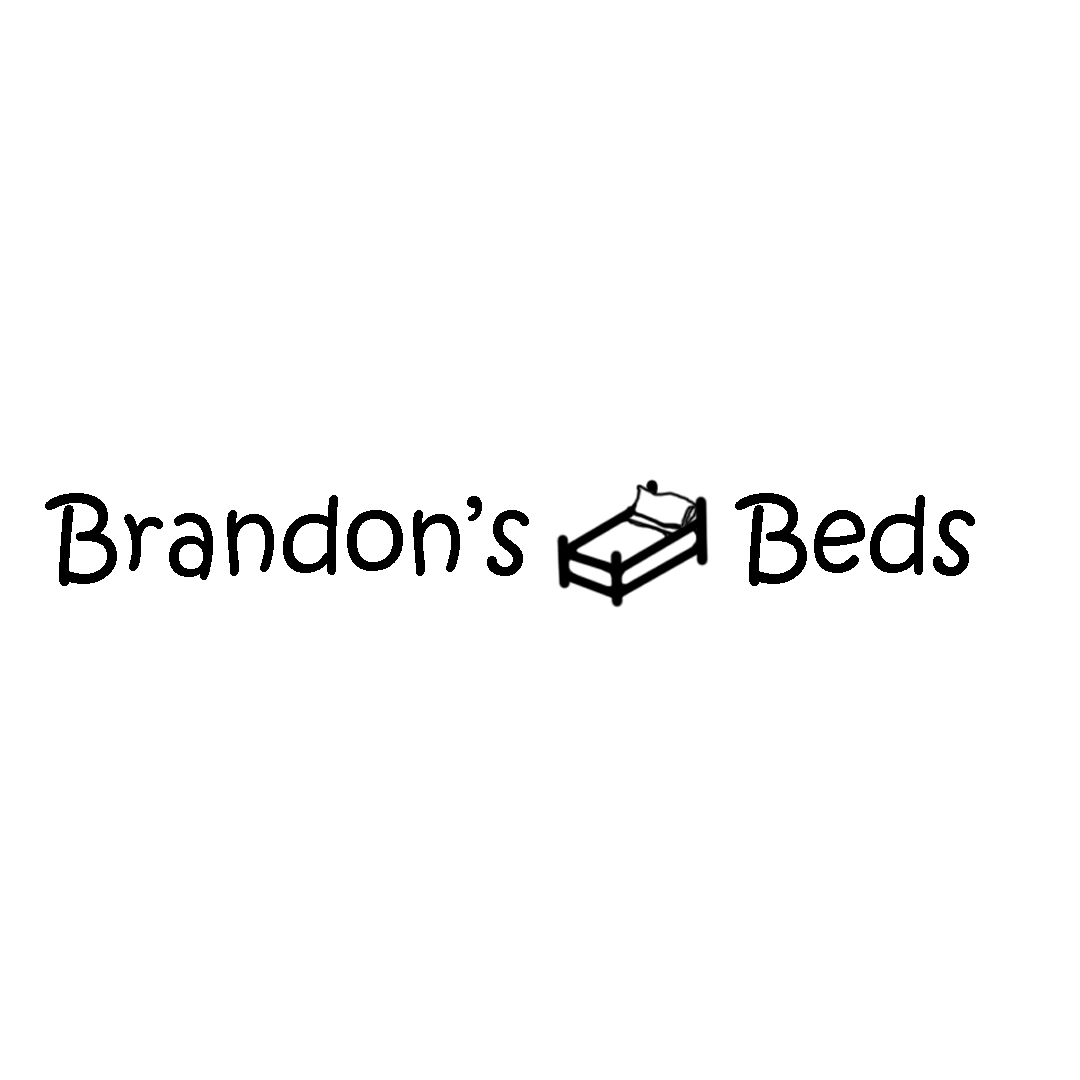
<style>
.page{position:relative;width:1080px;height:1080px;background:#ffffff}
.page>*{position:absolute;margin:0}
.t1{font:100px "KristenITC-Regular";color:#000000}
</style>
<div class="page">
<p class="t1" style="left:45px;top:493px;width:930px;height:93px">Brandon’s       Beds</p>
</div>
